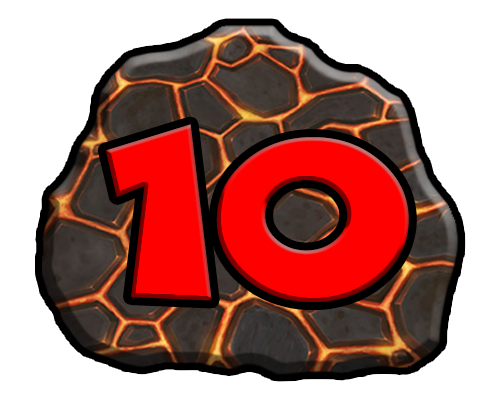
<style>
.page{position:relative;width:500px;height:400px;background:#ffffff}
.page>*{position:absolute;margin:0}
.t1{font:241px "Funhouse";color:#ff0000}
</style>
<div class="page">
<p class="t1" style="left:105px;top:124px;width:304px;height:178px">10</p>
</div>
